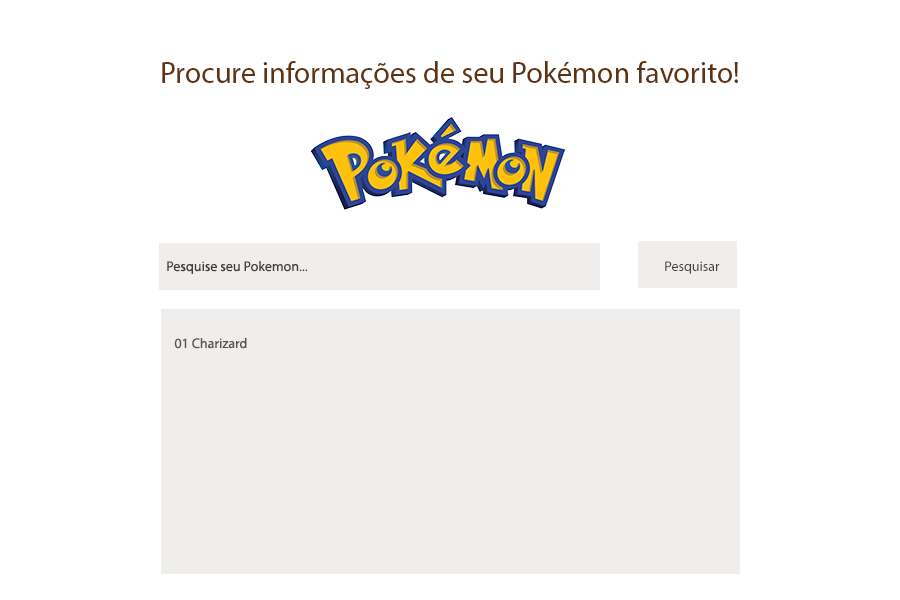
<style>
.page{position:relative;width:900px;height:600px;background:#ffffff}
.page>*{position:absolute;margin:0}
.t1{font:30px "MyriadPro-Regular";color:#60320f}
.t2{font:14px "MyriadPro-Regular";color:#423e3e}
.t3{font:14px "MyriadPro-Regular";color:#54534e}
</style>
<div class="page">
<p class="t1" style="left:162px;top:61px;width:576px;height:28px">Procure informações de seu Pokémon favorito!</p>
<p class="t2" style="left:167px;top:261px;width:141px;height:13px">Pesquise seu Pokemon...</p>
<p class="t2" style="left:665px;top:261px;width:55px;height:13px">Pesquisar</p>
<p class="t3" style="left:174px;top:338px;width:73px;height:11px">01 Charizard</p>
</div>
